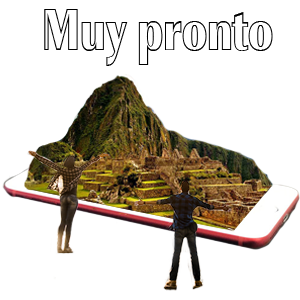
<style>
.page{position:relative;width:300px;height:300px;background:#ffffff}
.page>*{position:absolute;margin:0}
.t1{font:57.6px "ImperialOuHeavy";color:#000000;scale:0.71 1}
</style>
<div class="page">
<p class="t1" style="left:44px;top:9px;width:229px;height:57px">Muy pronto</p>
</div>
